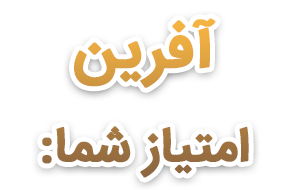
<style>
.page{position:relative;width:290px;height:190px;background:#ffffff}
.page>*{position:absolute;margin:0}
.t1{font:48px/94px "IRANSansWeb-Bold";font-weight:bold}
.t2{font:60px/94px "IRANSansWeb-Bold";font-weight:bold}
</style>
<div class="page">
<p class="t1" style="left:42px;top:18px;width:207px;height:160px;text-align:center"><span class="t2">آفرین<br></span>امتیاز شما:</p>
</div>
